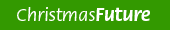
<style>
.page{position:relative;width:170px;height:30px;background:#339900}
.page>*{position:absolute;margin:0}
.t1{font:19px "ATFlora-Medium";color:#ffffff}
.t2{font:19px "ATFlora-Bold";color:#ffffff}
</style>
<div class="page">
<p class="t1" style="left:17px;top:7px;width:133px;height:14px">Christmas<span class="t2">Future</span></p>
</div>
